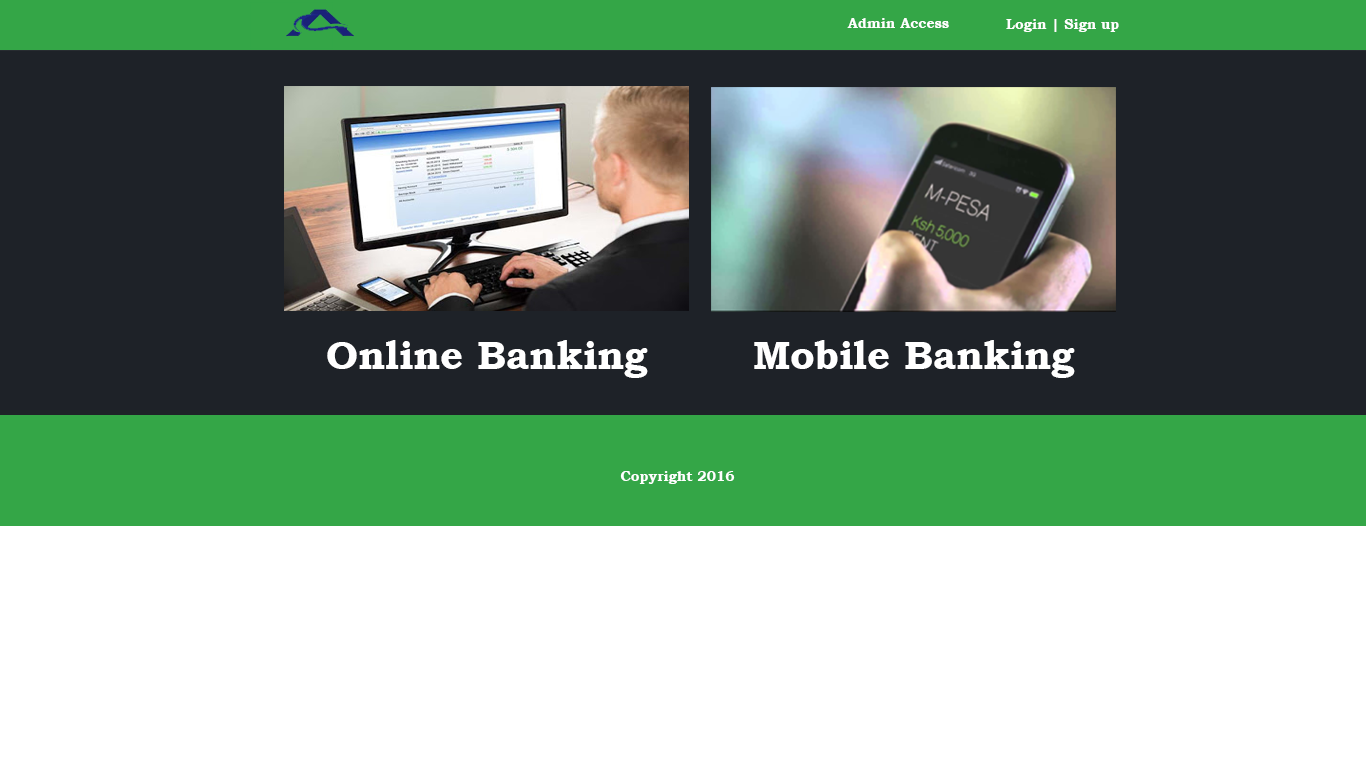
<style>
.page{position:relative;width:1366px;height:768px;background:#ffffff}
.page>*{position:absolute;margin:0}
.t1{font:14px "BookmanOldStyle-Bold";color:#ffffff}
.t2{font:40px "BookmanOldStyle-Bold";color:#ffffff}
</style>
<div class="page">
<p class="t1" style="left:847px;top:18px;width:102px;height:10px">Admin Access</p>
<p class="t1" style="left:1006px;top:19px;width:113px;height:13px">Login | Sign up</p>
<p class="t2" style="left:327px;top:340px;width:321px;height:38px">Online Banking</p>
<p class="t2" style="left:754px;top:340px;width:321px;height:38px">Mobile Banking</p>
<p class="t1" style="left:620px;top:471px;width:115px;height:13px">Copyright 2016</p>
</div>
